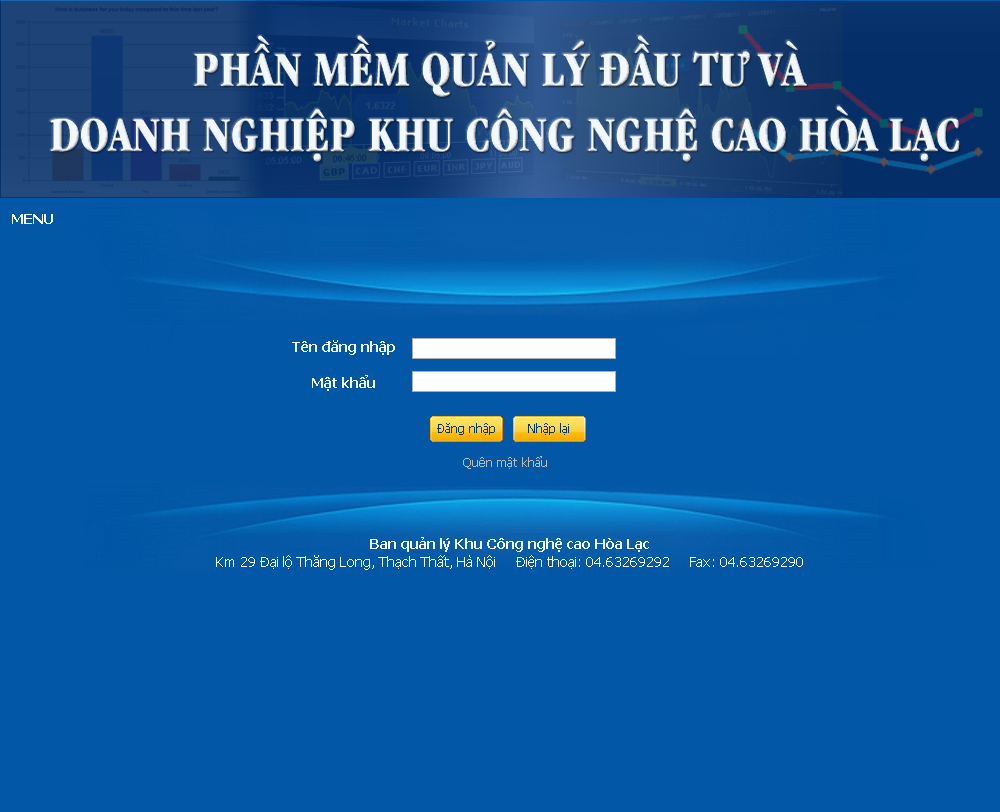
<style>
.page{position:relative;width:1000px;height:812px;background:#0257a7}
.page>*{position:absolute;margin:0}
.t1{font:50.7px/65.2px "UVNGiaDinhHepBold";color:#f3f8fd}
.t2{font:14px "Tahoma-Bold";color:#f3f8fd}
.t3{font:14px/18px "Tahoma-Bold";color:#f3f8fd}
.t4{font:12px "Tahoma";color:#bcbdbd}
.t5{font:14px/18px "Tahoma";color:#f3f8fd}
</style>
<div class="page">
<p class="t1" style="left:50px;top:35px;width:910px;height:127px;text-align:center">PHẦN MỀM QUẢN LÝ ĐẦU TƯ VÀ <br>DOANH NGHIỆP KHU CÔNG NGHỆ CAO HÒA LẠC</p>
<p class="t2" style="left:12px;top:214px;width:41px;height:10px">MENU</p>
<p class="t3" style="left:292px;top:340px;width:103px;height:51px;text-align:center">Tên đăng nhập<br><br>Mật khẩu</p>
<p class="t4" style="left:463px;top:456px;width:84px;height:13px">Quên mật khẩu</p>
<p class="t5" style="left:216px;top:537px;width:587px;height:33px;text-align:center"><span class="t3">Ban quản lý Khu Công nghệ cao Hòa Lạc<br></span>Km 29 Đại lộ Thăng Long, Thạch Thất, Hà Nội     Điện thoại: 04.63269292     Fax: 04.63269290</p>
</div>
